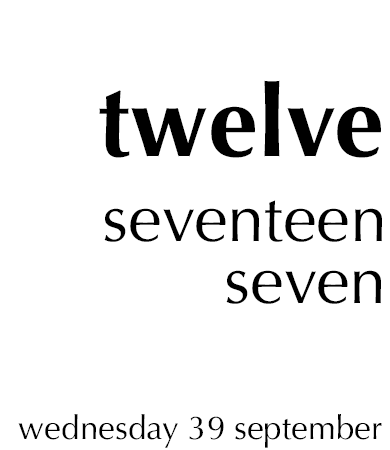
<style>
.page{position:relative;width:390px;height:450px;background:#ffffff}
.page>*{position:absolute;margin:0}
.t1{font:100px "Optima-Bold";color:#000000}
.t2{font:66.7px "Optima-Regular";color:#000000}
.t3{font:33.3px "Optima-Regular";color:#000000}
</style>
<div class="page">
<p class="t1" style="left:99px;top:80px;width:282px;height:78px">twelve</p>
<p class="t2" style="left:104px;top:200px;width:278px;height:42px">seventeen</p>
<p class="t2" style="left:226px;top:270px;width:155px;height:34px">seven</p>
<p class="t3" style="left:18px;top:414px;width:160px;height:34px">wednesday</p>
<p class="t3" style="left:235px;top:414px;width:147px;height:34px">september</p>
<p class="t3" style="left:189px;top:416px;width:14px;height:24px">3</p>
<p class="t3" style="left:208px;top:416px;width:16px;height:24px">9</p>
</div>
